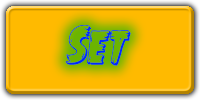
<style>
.page{position:relative;width:200px;height:100px;background:#ffba00}
.page>*{position:absolute;margin:0}
.t1{font:48px "Mrs.Monster3DItalic";color:#002aff}
</style>
<div class="page">
<p class="t1" style="left:65px;top:25px;width:66px;height:41px">Set</p>
</div>
